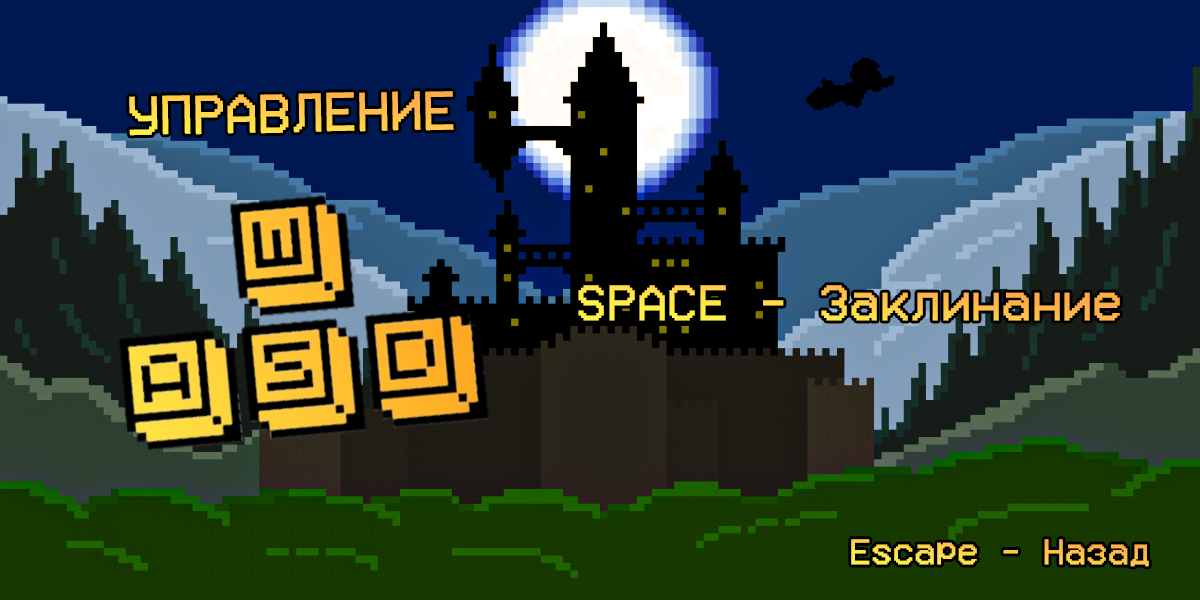
<style>
.page{position:relative;width:1200px;height:600px}
.page>*{position:absolute;margin:0}
.t1{font:43.9px "VCROSDMonoRUSbyD"}
.t2{font:40.5px "VCROSDMonoRUSbyD"}
.t3{font:28.7px "VCROSDMonoRUSbyD"}
</style>
<div class="page">
<p class="t1" style="left:129px;top:91px;width:325px;height:45px;rotate:-1deg">УПРАВЛЕНИЕ</p>
<p class="t2" style="left:578px;top:285px;width:542px;height:36px">SPACE - Заклинание</p>
<p class="t3" style="left:851px;top:539px;width:298px;height:28px">Escape - Назад</p>
</div>
